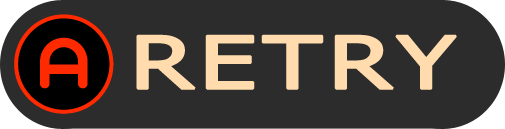
<style>
.page{position:relative;width:505px;height:129px;background:#2c2c2c}
.page>*{position:absolute;margin:0}
.t1{font:72px "Tahoma";letter-spacing:0.04em;color:#ffdbad;font-weight:bold;scale:1.4 1}
</style>
<div class="page">
<p class="t1" style="left:136px;top:34px;width:321px;height:56px">RETRY</p>
</div>
